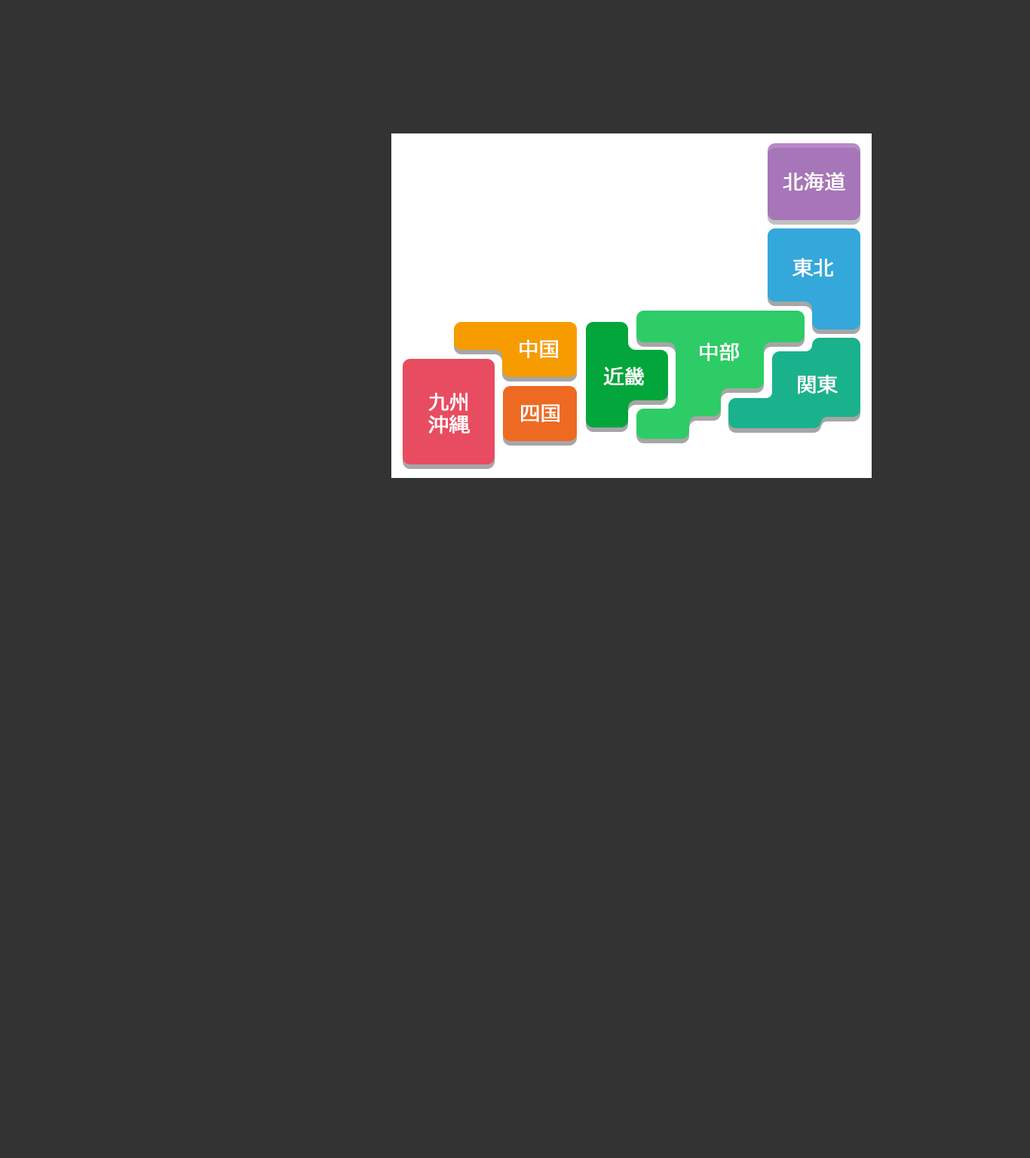
<style>
.page{position:relative;width:1030px;height:1158px;background:#333333}
.page>*{position:absolute;margin:0}
.t1{font:20.4px "Meiryo";color:#ffffff;font-weight:bold}
.t2{font:20.4px/22.6px "Meiryo";color:#ffffff;font-weight:bold}
</style>
<div class="page">
<p class="t1" style="left:783px;top:172px;width:62px;height:19px">北海道</p>
<p class="t1" style="left:792px;top:258px;width:41px;height:19px">東北</p>
<p class="t1" style="left:519px;top:339px;width:39px;height:19px">中国</p>
<p class="t1" style="left:700px;top:342px;width:39px;height:19px">中部</p>
<p class="t1" style="left:603px;top:366px;width:41px;height:20px">近畿</p>
<p class="t1" style="left:798px;top:375px;width:40px;height:19px">関東</p>
<p class="t2" style="left:428px;top:393px;width:42px;height:41px">九州<br>沖縄</p>
<p class="t1" style="left:521px;top:404px;width:38px;height:18px">四国</p>
</div>
